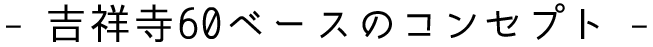
<style>
.page{position:relative;width:653px;height:47px;background:#ffffff}
.page>*{position:absolute;margin:0}
.t1{font:42px "komorebi-gothic";letter-spacing:0.05em;color:#000000}
.t2{font:42px "komorebi-gothic";color:#000000}
</style>
<div class="page">
<p class="t1" style="left:6px;top:3px;width:641px;height:39px"><span class="t2">- </span>吉祥寺60ベース<span class="t2">のコンセプト -</span></p>
</div>
